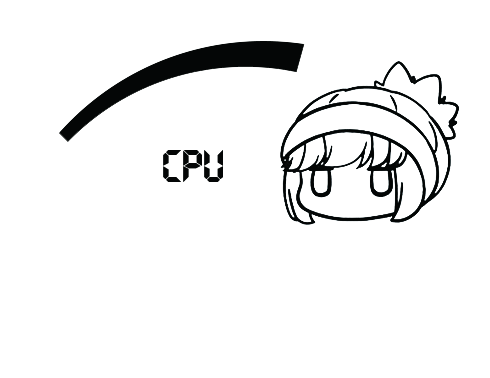
<style>
.page{position:relative;width:490px;height:378px;background:#ffffff}
.page>*{position:absolute;margin:0}
.t1{font:45.8px "UniDream-LED";color:#040606}
</style>
<div class="page">
<p class="t1" style="left:163px;top:150px;width:60px;height:32px">CPU</p>
</div>
